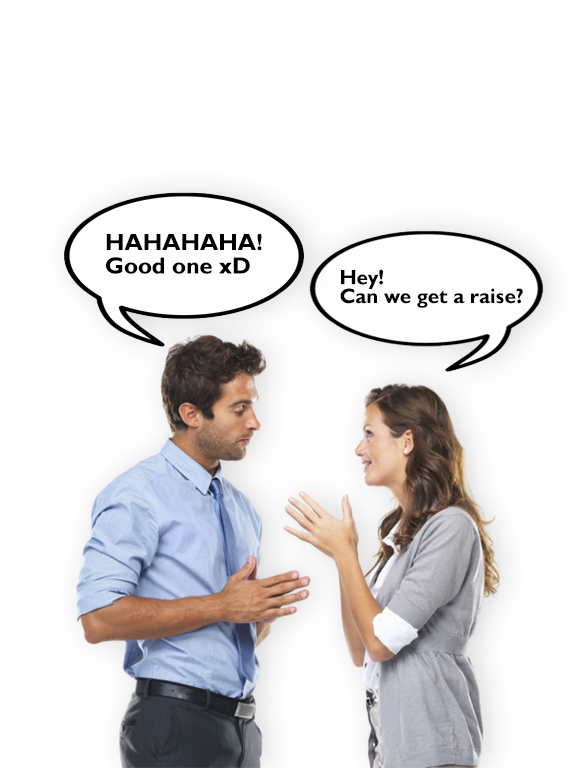
<style>
.page{position:relative;width:583px;height:768px;background:#ffffff}
.page>*{position:absolute;margin:0}
.t1{font:23.4px/23.4px "GillSansMT-Bold";color:#000000}
.t2{font:20.6px/18.7px "GillSansMT-Bold";color:#000000}
</style>
<div class="page">
<p class="t1" style="left:106px;top:233px;width:156px;height:41px">HAHAHAHA! <br>Good one xD</p>
<p class="t2" style="left:340px;top:269px;width:183px;height:39px">Hey! <br>Can we get a raise?</p>
</div>
